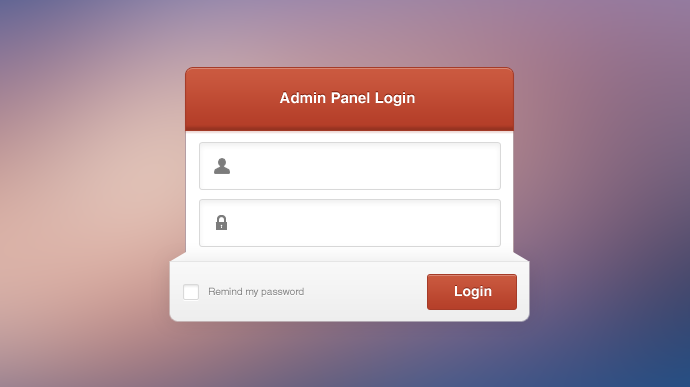
<style>
.page{position:relative;width:690px;height:387px}
.page>*{position:absolute;margin:0}
.t1{font:15px "Helvetica-Bold";color:#ffffff}
.t2{font:10px "Helvetica";color:#7d7d7d}
.t3{font:14px "Helvetica-Bold";color:#ffffff}
</style>
<div class="page">
<p class="t1" style="left:279px;top:92px;width:136px;height:14px">Admin Panel Login</p>
<p class="t2" style="left:209px;top:287px;width:95px;height:10px">Remind my password</p>
<p class="t3" style="left:455px;top:286px;width:37px;height:13px">Login</p>
</div>
